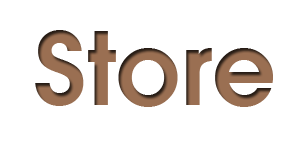
<style>
.page{position:relative;width:300px;height:144px;background:#ffffff}
.page>*{position:absolute;margin:0}
.t1{font:100px "AvantGarde-Demi";color:#9a6f52}
</style>
<div class="page">
<p class="t1" style="left:35px;top:30px;width:238px;height:77px">Store</p>
</div>
